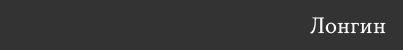
<style>
.page{position:relative;width:403px;height:50px;background:#333333}
.page>*{position:absolute;margin:0}
.t1{font:24px "CrimsonText-Regular";color:#ffffff}
</style>
<div class="page">
<p class="t1" style="left:310px;top:17px;width:76px;height:17px">Лонгин</p>
</div>
